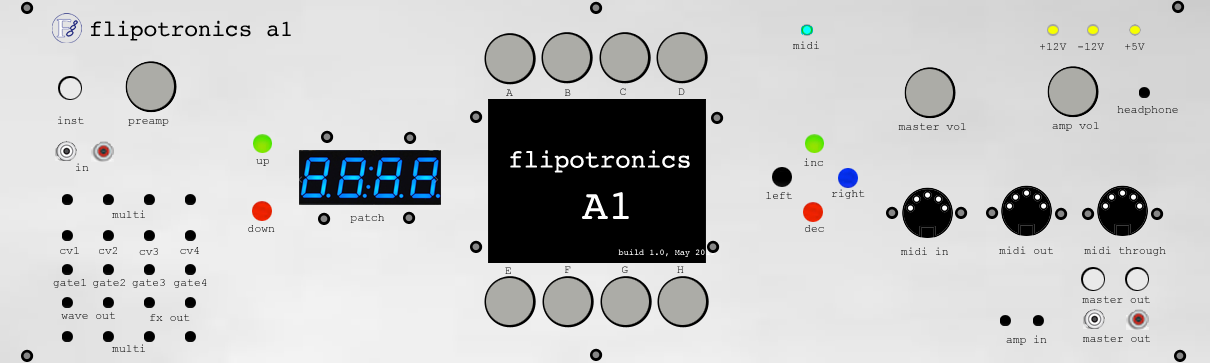
<style>
.page{position:relative;width:1210px;height:363px}
.page>*{position:absolute;margin:0}
.t1{font:22.7px "Courier";color:#000000}
.t2{font:11.3px "CourierNewPSMT"}
.t3{font:25.5px "Courier";color:#ffffff}
.t4{font:42.5px "Courier";color:#ffffff}
.t5{font:8.5px "Courier";color:#ffffff}
</style>
<div class="page">
<p class="t1" style="left:91px;top:20px;width:200px;height:21px">flipotronics a1</p>
<p class="t2" style="left:793px;top:41px;width:26px;height:8px">midi</p>
<p class="t2" style="left:1040px;top:43px;width:27px;height:7px">+12V</p>
<p class="t2" style="left:1078px;top:43px;width:26px;height:7px">-12V</p>
<p class="t2" style="left:1125px;top:43px;width:20px;height:7px">+5V</p>
<p class="t2" style="left:506px;top:89px;width:7px;height:7px">A</p>
<p class="t2" style="left:565px;top:89px;width:6px;height:7px">B</p>
<p class="t2" style="left:620px;top:88px;width:6px;height:7px">C</p>
<p class="t2" style="left:678px;top:88px;width:7px;height:7px">D</p>
<p class="t2" style="left:1117px;top:106px;width:61px;height:9px">headphone</p>
<p class="t2" style="left:58px;top:116px;width:26px;height:8px">inst</p>
<p class="t2" style="left:128px;top:119px;width:41px;height:7px">preamp</p>
<p class="t2" style="left:898px;top:123px;width:68px;height:7px">master vol</p>
<p class="t2" style="left:1052px;top:122px;width:47px;height:9px">amp vol</p>
<p class="t3" style="left:510px;top:150px;width:180px;height:23px">flipotronics</p>
<p class="t2" style="left:256px;top:159px;width:13px;height:7px">up</p>
<p class="t2" style="left:804px;top:158px;width:19px;height:8px">inc</p>
<p class="t2" style="left:76px;top:163px;width:13px;height:8px">in</p>
<p class="t4" style="left:582px;top:192px;width:47px;height:27px">A1</p>
<p class="t2" style="left:766px;top:192px;width:26px;height:7px">left</p>
<p class="t2" style="left:832px;top:189px;width:33px;height:10px">right</p>
<p class="t2" style="left:112px;top:210px;width:33px;height:8px">multi</p>
<p class="t2" style="left:350px;top:214px;width:34px;height:9px">patch</p>
<p class="t2" style="left:248px;top:225px;width:27px;height:7px">down</p>
<p class="t2" style="left:805px;top:225px;width:19px;height:7px">dec</p>
<p class="t2" style="left:999px;top:246px;width:54px;height:8px">midi out</p>
<p class="t2" style="left:1084px;top:246px;width:82px;height:10px">midi through</p>
<p class="t2" style="left:60px;top:247px;width:19px;height:7px">cv1</p>
<p class="t2" style="left:99px;top:247px;width:18px;height:7px">cv2</p>
<p class="t2" style="left:139px;top:248px;width:19px;height:7px">cv3</p>
<p class="t2" style="left:180px;top:247px;width:19px;height:7px">cv4</p>
<p class="t5" style="left:618px;top:249px;width:97px;height:8px">build 1.0, May 2019</p>
<p class="t2" style="left:901px;top:247px;width:47px;height:8px">midi in</p>
<p class="t2" style="left:505px;top:267px;width:6px;height:7px">E</p>
<p class="t2" style="left:565px;top:266px;width:6px;height:7px">F</p>
<p class="t2" style="left:622px;top:266px;width:6px;height:7px">G</p>
<p class="t2" style="left:677px;top:266px;width:7px;height:7px">H</p>
<p class="t2" style="left:53px;top:279px;width:33px;height:9px">gate1</p>
<p class="t2" style="left:93px;top:279px;width:32px;height:9px">gate2</p>
<p class="t2" style="left:132px;top:279px;width:33px;height:9px">gate3</p>
<p class="t2" style="left:174px;top:279px;width:33px;height:9px">gate4</p>
<p class="t2" style="left:1082px;top:296px;width:68px;height:7px">master out</p>
<p class="t2" style="left:61px;top:312px;width:54px;height:7px">wave out</p>
<p class="t2" style="left:150px;top:314px;width:40px;height:7px">fx out</p>
<p class="t2" style="left:1006px;top:335px;width:41px;height:10px">amp in</p>
<p class="t2" style="left:1083px;top:335px;width:67px;height:7px">master out</p>
<p class="t2" style="left:112px;top:344px;width:33px;height:8px">multi</p>
</div>
